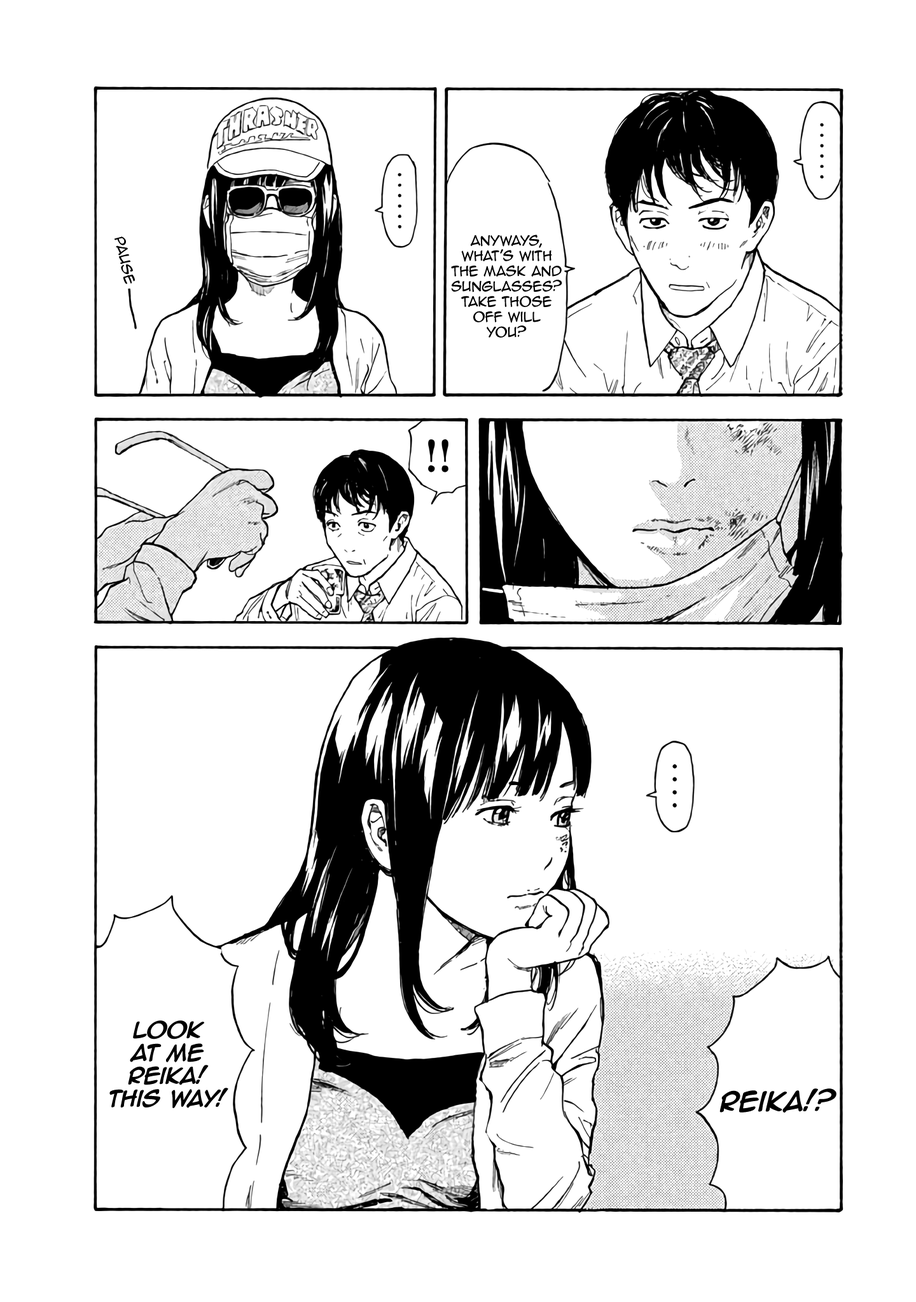
<style>
.page{position:relative;width:916px;height:1302px;background:#ffffff}
.page>*{position:absolute;margin:0}
.t1{font:12.7px "AnimeAce2.0BB";color:#000000}
.t2{font:19.1px "AnimeAce2.0BB-Bold";color:#000000}
.t3{font:22.9px "AnimeAce2.0BB-Bold";color:#000000}
</style>
<div class="page">
<p class="t1" style="left:114px;top:237px;width:21px;height:47px;rotate:77deg">pause</p>
<p class="t1" style="left:451px;top:235px;width:111px;height:103px;text-align:center">Anyways, what’s with the mask and sunglasses? take those off will you?</p>
<p class="t2" style="left:109px;top:1021px;width:119px;height:87px;text-align:center">Look at me  Reika! This way!</p>
<p class="t3" style="left:719px;top:1089px;width:117px;height:24px">reika!?</p>
</div>
